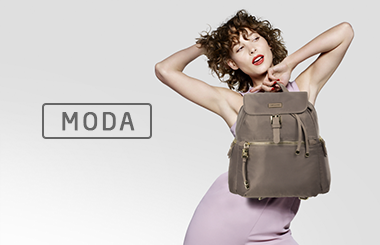
<style>
.page{position:relative;width:380px;height:245px;background:#dfdfdf}
.page>*{position:absolute;margin:0}
.t1{font:24px "NeoSansPro-Regular";letter-spacing:0.1em;color:#666666;font-weight:bold}
</style>
<div class="page">
<p class="t1" style="left:62px;top:112px;width:73px;height:19px">MODA</p>
</div>
